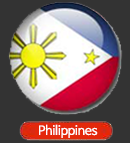
<style>
.page{position:relative;width:130px;height:143px;background:#333333}
.page>*{position:absolute;margin:0}
.t1{font:12.4px "NanumBarunGothic";letter-spacing:-0.025em;color:#ffffff}
</style>
<div class="page">
<p class="t1" style="left:39px;top:124px;width:59px;height:14px">Philippines</p>
</div>
